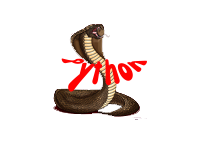
<style>
.page{position:relative;width:200px;height:150px;background:#ffffff}
.page>*{position:absolute;margin:0}
.t1{font:18px "ComicSansMS-Bold";color:#ff0303}
</style>
<div class="page">
<p class="t1" style="left:61px;top:58px;width:86px;height:34px">Python</p>
</div>
